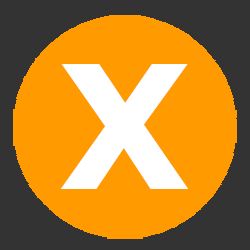
<style>
.page{position:relative;width:250px;height:250px;background:#ff9a00}
.page>*{position:absolute;margin:0}
.t1{font:171.6px "Verdana-Bold";color:#ffffff}
</style>
<div class="page">
<p class="t1" style="left:60px;top:64px;width:128px;height:125px">X</p>
</div>
